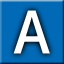
<style>
.page{position:relative;width:64px;height:64px;background:#006ab6}
.page>*{position:absolute;margin:0}
.t1{font:55.5px "NanumBarunGothicBold";color:#ffffff}
</style>
<div class="page">
<p class="t1" style="left:13px;top:10px;width:37px;height:44px">A</p>
</div>
